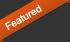
<style>
.page{position:relative;width:70px;height:42px;background:#333333}
.page>*{position:absolute;margin:0}
.t1{font:10px "ArialMT";color:#ffffff}
</style>
<div class="page">
<p class="t1" style="left:4px;top:4px;width:38px;height:27px;rotate:-30deg">Featured</p>
</div>
